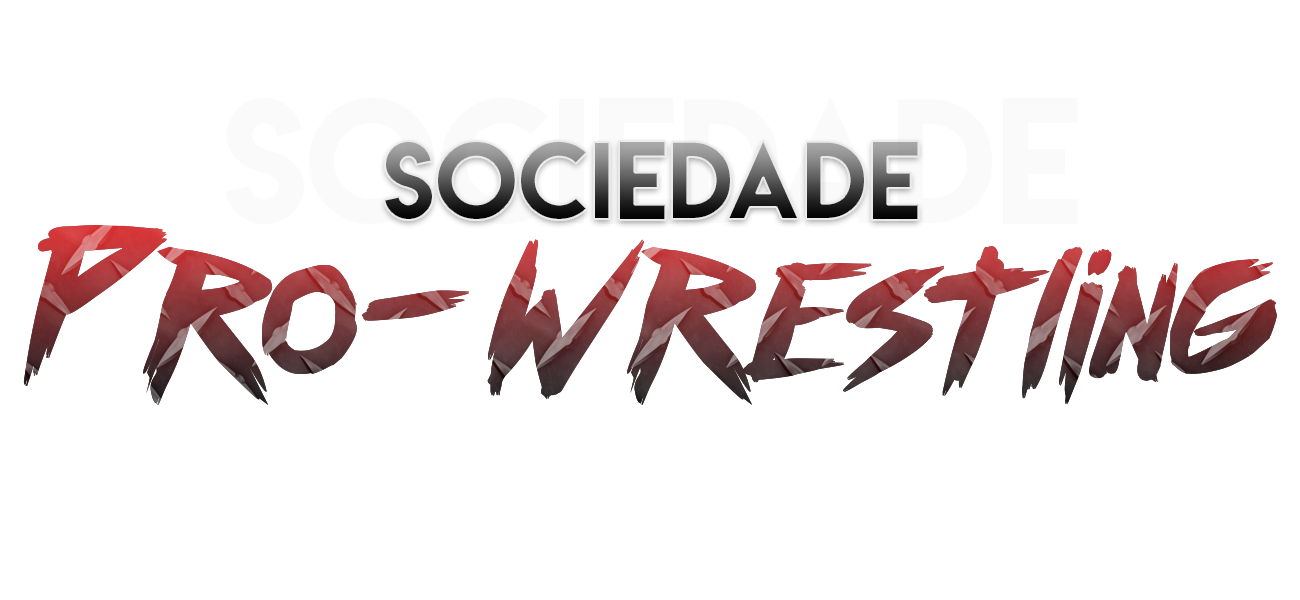
<style>
.page{position:relative;width:1300px;height:600px;background:#ffffff}
.page>*{position:absolute;margin:0}
.t1{font:98.3px "LemonMilk"}
.t2{font:150px "outrunfuture"}
</style>
<div class="page">
<p class="t1" style="left:384px;top:139px;width:535px;height:81px">Sociedade</p>
<p class="t2" style="left:23px;top:225px;width:1254px;height:180px">Pro-Wrestling</p>
<p class="t2" style="left:23px;top:225px;width:1254px;height:180px">Pro-Wrestling</p>
</div>
